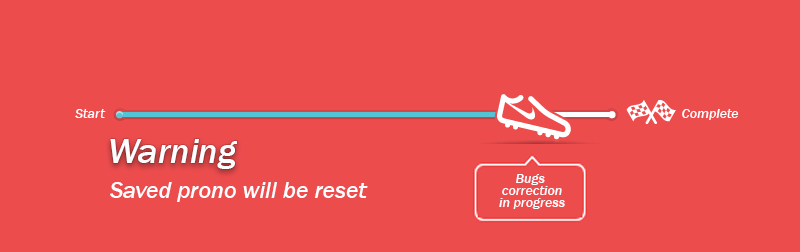
<style>
.page{position:relative;width:800px;height:252px;background:#ed4c4d}
.page>*{position:absolute;margin:0}
.t1{font:14px "FranklinGothic-MediumItalic";color:#fcfdfe}
.t2{font:36px "FranklinGothic-MediumItalic";color:#fcfdfe}
.t3{font:14px/12px "FranklinGothic-MediumItalic";color:#fcfdfe}
.t4{font:24px "FranklinGothic-MediumItalic";color:#fcfdfe}
</style>
<div class="page">
<p class="t1" style="left:75px;top:109px;width:31px;height:9px">Start</p>
<p class="t1" style="left:682px;top:109px;width:57px;height:11px">Complete</p>
<p class="t2" style="left:110px;top:139px;width:127px;height:30px">Warning</p>
<p class="t3" style="left:499px;top:174px;width:66px;height:35px;text-align:center">Bugs <br>correction<br>in progress</p>
<p class="t4" style="left:110px;top:182px;width:258px;height:20px">Saved prono will be reset</p>
</div>
